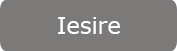
<style>
.page{position:relative;width:177px;height:51px;background:#7c7979}
.page>*{position:absolute;margin:0}
.t1{font:22.5px "MSReferenceSansSerif";color:#ffffff}
</style>
<div class="page">
<p class="t1" style="left:58px;top:17px;width:62px;height:17px">Iesire</p>
</div>
